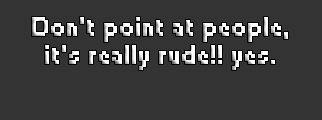
<style>
.page{position:relative;width:322px;height:120px;background:#333333}
.page>*{position:absolute;margin:0}
.t1{font:24px/28px "Small Fonts";color:#ffffff;font-weight:bold}
</style>
<div class="page">
<p class="t1" style="left:32px;top:17px;width:256px;height:53px;text-align:center">Don’t point at people,<br>it’s really rude!! yes.</p>
</div>
